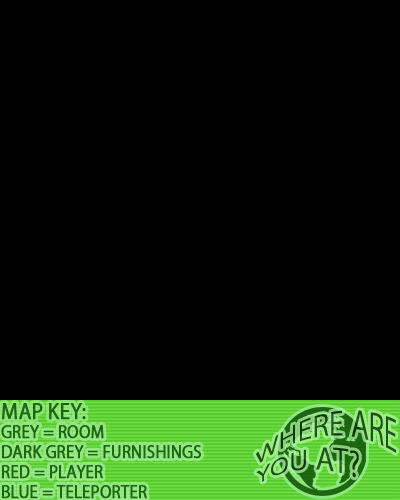
<style>
.page{position:relative;width:400px;height:500px;background:#000000}
.page>*{position:absolute;margin:0}
.t1{font:20.9px "KozGoPr6N-Regular";color:#1a650e;font-weight:bold;scale:0.92 1}
.t2{font:29.2px "KozGoPr6N-Regular";scale:0.92 1}
.t3{font:16.7px "KozGoPr6N-Regular";color:#1a650e;font-weight:bold;scale:0.92 1}
</style>
<div class="page">
<p class="t1" style="left:2px;top:403px;width:84px;height:17px">MAP KEY:</p>
<p class="t2" style="left:256px;top:410px;width:140px;height:72px">WHERE ARE <br>YOU AT?</p>
<p class="t3" style="left:1px;top:425px;width:200px;height:74px">GREY = ROOM<br>DARK GREY = FURNISHINGS<br>RED = PLAYER<br>BLUE = TELEPORTER</p>
</div>
